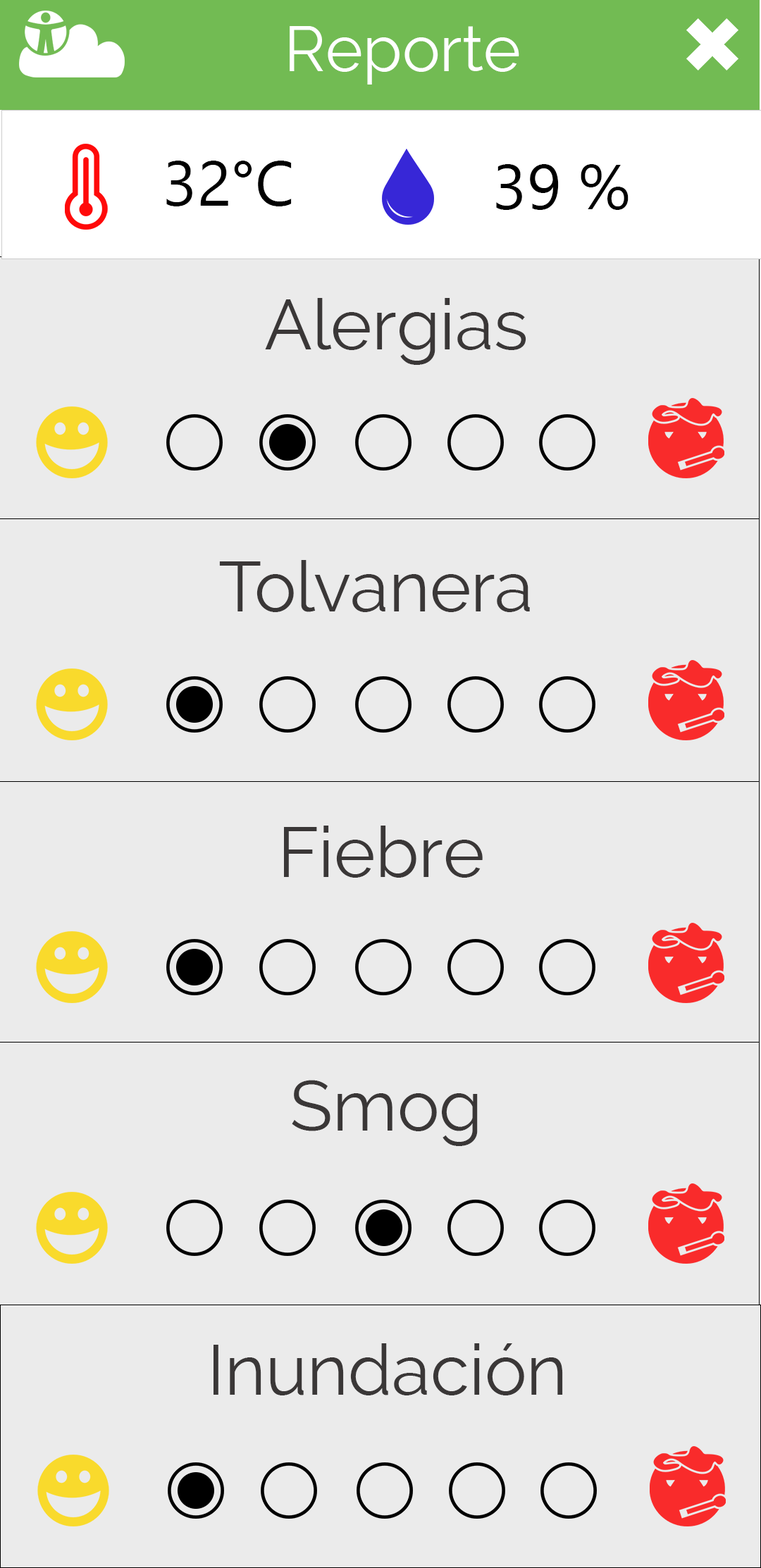
<style>
.page{position:relative;width:761px;height:1568px;background:#ebebeb}
.page>*{position:absolute;margin:0}
.t1{font:63.4px "Raleway";color:#ffffff}
.t2{font:63.4px "NirmalaUI";color:#000000}
.t3{font:70.4px "Raleway";color:#3a3737}
</style>
<div class="page">
<p class="t1" style="left:289px;top:26px;width:230px;height:59px">Reporte</p>
<p class="t2" style="left:166px;top:161px;width:126px;height:45px">32°C</p>
<p class="t2" style="left:496px;top:164px;width:132px;height:46px">39 %</p>
<p class="t3" style="left:265px;top:298px;width:261px;height:67px">Alergias</p>
<p class="t3" style="left:219px;top:560px;width:311px;height:52px">Tolvanera</p>
<p class="t3" style="left:284px;top:825px;width:198px;height:53px">Fiebre</p>
<p class="t3" style="left:292px;top:1080px;width:185px;height:66px">Smog</p>
<p class="t3" style="left:213px;top:1343px;width:350px;height:52px">Inundación</p>
</div>
